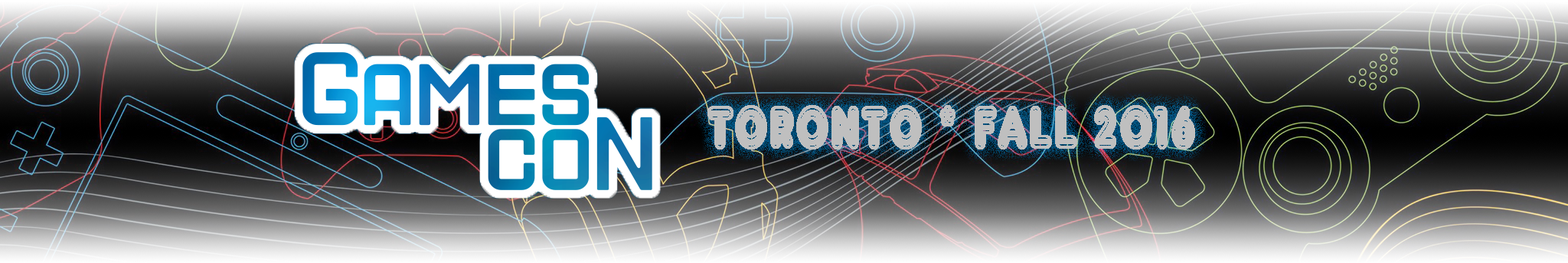
<style>
.page{position:relative;width:1568px;height:263px}
.page>*{position:absolute;margin:0}
.t1{font:63.1px "ARDELANEY";color:#bfbfbf;text-transform:uppercase;font-weight:bold;scale:0.69 1}
</style>
<div class="page">
<p class="t1" style="left:707px;top:105px;width:488px;height:44px">Toronto * fall 2016</p>
</div>
